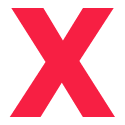
<style>
.page{position:relative;width:125px;height:125px;background:#ffffff}
.page>*{position:absolute;margin:0}
.t1{font:150px "Tahoma-Bold";color:#f81f43}
</style>
<div class="page">
<p class="t1" style="left:9px;top:8px;width:106px;height:109px">X</p>
</div>
